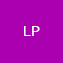
<style>
.page{position:relative;width:63px;height:63px;background:#aa00b0}
.page>*{position:absolute;margin:0}
.t1{font:16px "Corbel";color:#ffffff}
</style>
<div class="page">
<p class="t1" style="left:24px;top:26px;width:16px;height:10px">LP</p>
</div>
